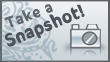
<style>
.page{position:relative;width:110px;height:62px}
.page>*{position:absolute;margin:0}
.t1{font:13px "SunnySide";letter-spacing:0.07em;color:#4d535b;font-weight:bold}
.t2{font:15px "SunnySide";letter-spacing:0.07em;color:#4d535b;font-weight:bold}
</style>
<div class="page">
<p class="t1" style="left:4px;top:4px;width:49px;height:23px;rotate:-21deg">Take a</p>
<p class="t2" style="left:5px;top:4px;width:80px;height:43px;rotate:-22deg">Snapshot!</p>
</div>
